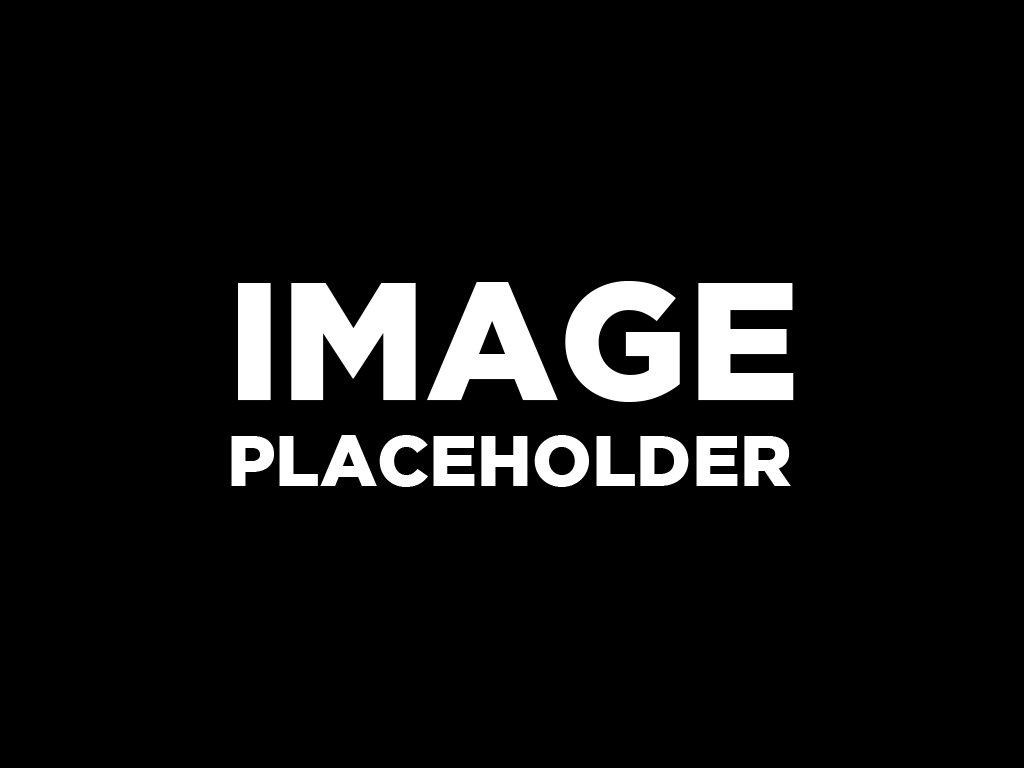
<style>
.page{position:relative;width:1024px;height:768px;background:#000000}
.page>*{position:absolute;margin:0}
.t1{font:72px "GothamBlack";color:#ffffff}
.t2{font:167px "GothamBlack";color:#ffffff}
</style>
<div class="page">
<p class="t1" style="left:231px;top:281px;width:563px;height:206px"><span class="t2">IMAGE<br></span>PLACEHOLDER</p>
</div>
